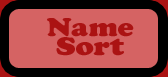
<style>
.page{position:relative;width:168px;height:77px;background:#d56363}
.page>*{position:absolute;margin:0}
.t1{font:26.7px/18.9px "CooperBlack";color:#ab1313;scale:1.13 1}
</style>
<div class="page">
<p class="t1" style="left:47px;top:18px;width:87px;height:38px;text-align:center">Name <br>Sort</p>
</div>
